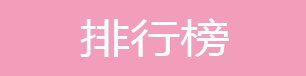
<style>
.page{position:relative;width:306px;height:76px;background:#f29dba}
.page>*{position:absolute;margin:0}
.t1{font:40.4px "MicrosoftYaHei";color:#ffffff;scale:1.24 1}
</style>
<div class="page">
<p class="t1" style="left:80px;top:18px;width:149px;height:39px">排行榜</p>
</div>
